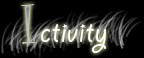
<style>
.page{position:relative;width:144px;height:58px;background:#000000}
.page>*{position:absolute;margin:0}
.t1{font:60px "CurlzMT";letter-spacing:0.03em}
.t2{font:36px "GiddyupStd";letter-spacing:0.03em;color:#ffffff}
</style>
<div class="page">
<p class="t1" style="left:21px;top:4px;width:15px;height:40px">I</p>
<p class="t2" style="left:41px;top:24px;width:65px;height:29px">ctivity</p>
</div>
